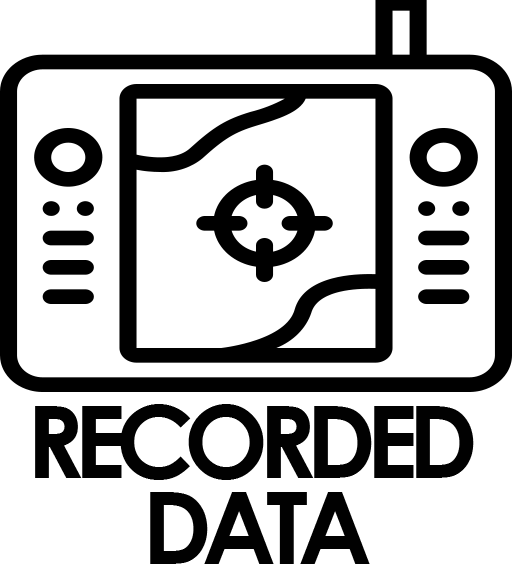
<style>
.page{position:relative;width:512px;height:576px;background:#ffffff}
.page>*{position:absolute;margin:0}
.t1{font:100px "CenturyGothic-Bold";letter-spacing:-0.1em;color:#010101}
</style>
<div class="page">
<p class="t1" style="left:35px;top:404px;width:439px;height:76px">RECORDED</p>
<p class="t1" style="left:150px;top:492px;width:220px;height:72px">DATA</p>
</div>
